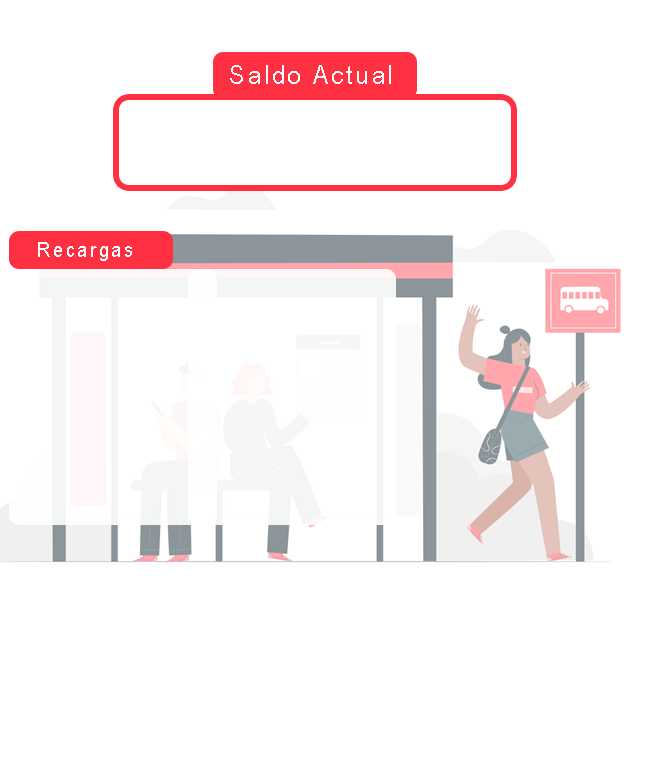
<style>
.page{position:relative;width:667px;height:767px;background:#ffffff}
.page>*{position:absolute;margin:0}
.t1{font:26.3px "ArialNarrow";letter-spacing:0.1em;color:#ffffff;scale:1.09 1}
.t2{font:21.1px "ArialNarrow";letter-spacing:0.1em;color:#ffffff;scale:1.09 1}
</style>
<div class="page">
<p class="t1" style="left:230px;top:65px;width:161px;height:19px">Saldo Actual</p>
<p class="t2" style="left:38px;top:242px;width:94px;height:19px">Recargas</p>
</div>
